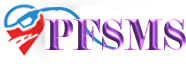
<style>
.page{position:relative;width:186px;height:64px;background:#ffffff}
.page>*{position:absolute;margin:0}
.t1{font:41.7px "Elephant-Regular";scale:0.83 1}
</style>
<div class="page">
<p class="t1" style="left:45px;top:19px;width:141px;height:31px">PFSMS</p>
</div>
